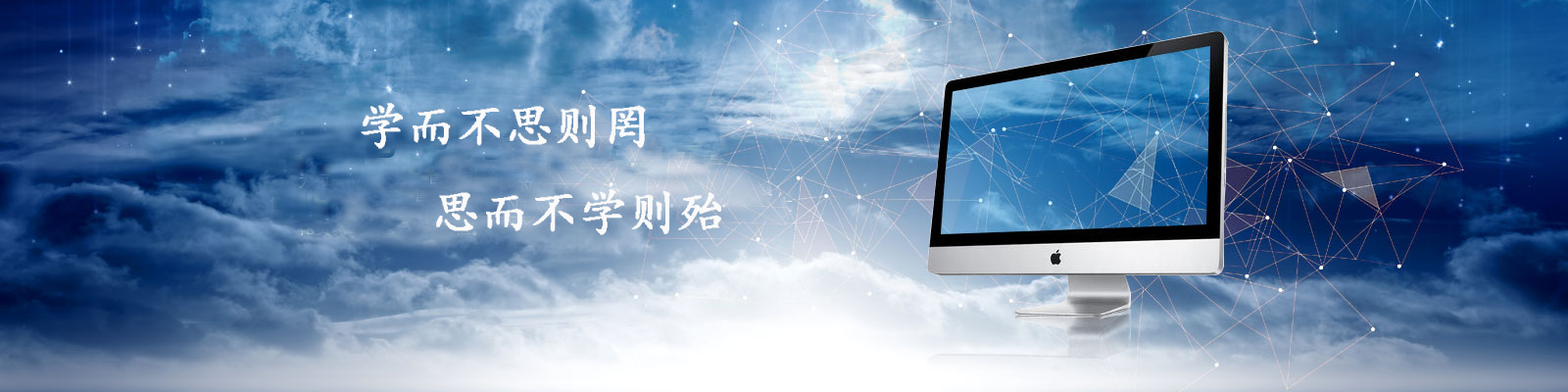
<style>
.page{position:relative;width:1568px;height:392px}
.page>*{position:absolute;margin:0}
.t1{font:49px "¿¬Ìå";color:#fbfafa;font-weight:bold}
</style>
<div class="page">
<p class="t1" style="left:361px;top:103px;width:360px;height:132px">学而不思则罔<br>   思而不学则殆</p>
</div>
